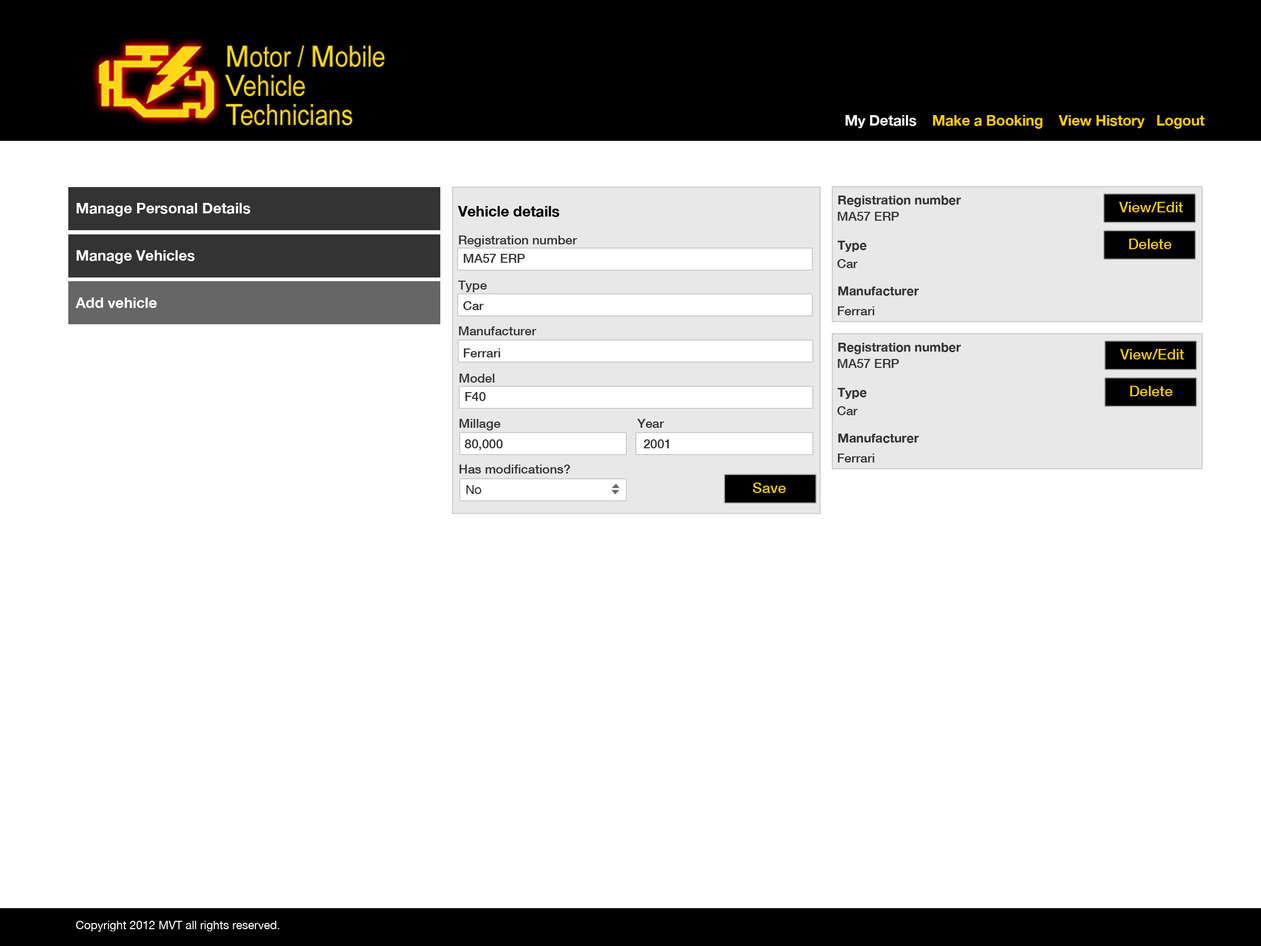
<style>
.page{position:relative;width:1261px;height:946px;background:#ffffff}
.page>*{position:absolute;margin:0}
.t1{font:14.7px "HelveticaNeue-Bold";letter-spacing:-0.012em;color:#ffcc00}
.t2{font:14.7px "HelveticaNeue-Bold";letter-spacing:-0.012em;color:#ffffff}
.t3{font:12.6px "HelveticaNeue-Bold";color:#333333}
.t4{font:14.7px/15.8px "HelveticaNeue-Bold";color:#ffffff}
.t5{font:14.7px "HelveticaNeue-Bold";color:#000000}
.t6{font:14.7px "HelveticaNeue-Medium";color:#ffcc00}
.t7{font:12.6px/15.8px "HelveticaNeue-Medium";color:#333333}
.t8{font:12.6px "HelveticaNeue-Medium";color:#333333}
.t9{font:12.6px "HelveticaNeue";color:#333333}
.t10{font:11.6px "HelveticaNeue";color:#ffffff}
</style>
<div class="page">
<p class="t1" style="left:845px;top:115px;width:360px;height:14px"><span class="t2">My Details</span>    Make a Booking    View History   Logout</p>
<p class="t3" style="left:837px;top:195px;width:124px;height:101px">Registration number<br><br><br>Type<br><br><br>Manufacturer</p>
<p class="t4" style="left:75px;top:203px;width:176px;height:105px">Manage Personal Details<br><br><br>Manage Vehicles<br><br><br>Add vehicle</p>
<p class="t5" style="left:458px;top:206px;width:102px;height:11px">Vehicle details</p>
<p class="t6" style="left:1119px;top:202px;width:64px;height:10px">View/Edit</p>
<p class="t7" style="left:837px;top:212px;width:62px;height:103px">MA57 ERP<br><br><br>Car<br><br><br>Ferrari</p>
<p class="t8" style="left:458px;top:235px;width:119px;height:100px">Registration number<br><br><br>Type<br><br><br>Manufacturer</p>
<p class="t6" style="left:1129px;top:239px;width:43px;height:10px">Delete</p>
<p class="t7" style="left:463px;top:254px;width:62px;height:103px">MA57 ERP<br><br><br>Car<br><br><br>Ferrari</p>
<p class="t3" style="left:837px;top:343px;width:124px;height:100px">Registration number<br><br><br>Type<br><br><br>Manufacturer</p>
<p class="t6" style="left:1120px;top:349px;width:64px;height:10px">View/Edit</p>
<p class="t7" style="left:837px;top:359px;width:62px;height:103px">MA57 ERP<br><br><br>Car<br><br><br>Ferrari</p>
<p class="t8" style="left:459px;top:374px;width:205px;height:99px">Model<br><br><br>Millage                                       Year<br><br><br>Has modifications?</p>
<p class="t6" style="left:1130px;top:386px;width:43px;height:10px">Delete</p>
<p class="t7" style="left:464px;top:392px;width:205px;height:58px">F40<br><br><br>80,000                                        2001</p>
<p class="t9" style="left:466px;top:485px;width:15px;height:9px">No</p>
<p class="t6" style="left:752px;top:482px;width:34px;height:11px">Save</p>
<p class="t10" style="left:76px;top:920px;width:204px;height:12px">Copyright 2012 MVT all rights reserved.</p>
</div>
